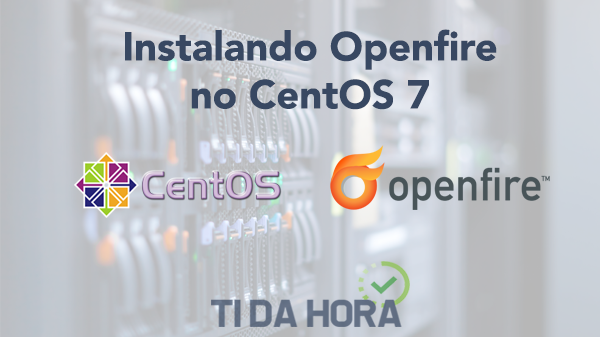
<style>
.page{position:relative;width:600px;height:337px}
.page>*{position:absolute;margin:0}
.t1{font:40px "Avenir-Black";color:#384862}
</style>
<div class="page">
<p class="t1" style="left:125px;top:29px;width:372px;height:81px;text-align:center">Instalando Openfire<br>no CentOS 7</p>
</div>
